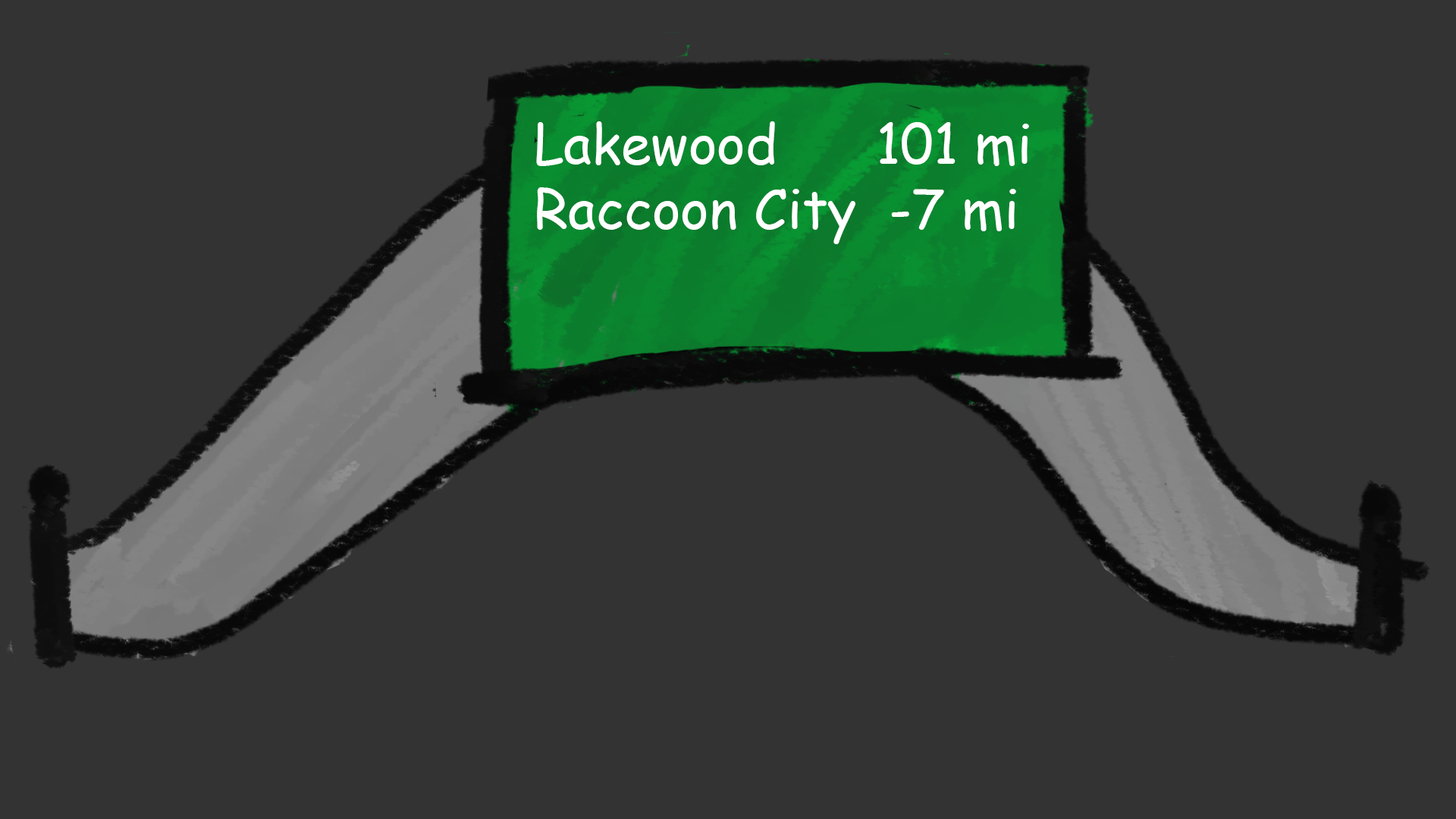
<style>
.page{position:relative;width:1456px;height:819px;background:#333333}
.page>*{position:absolute;margin:0}
.t1{font:54.6px "ComicSansMS";color:#ffffff}
</style>
<div class="page">
<p class="t1" style="left:536px;top:121px;width:493px;height:123px">Lakewood      101 mi<br>Raccoon City  -7 mi</p>
</div>
